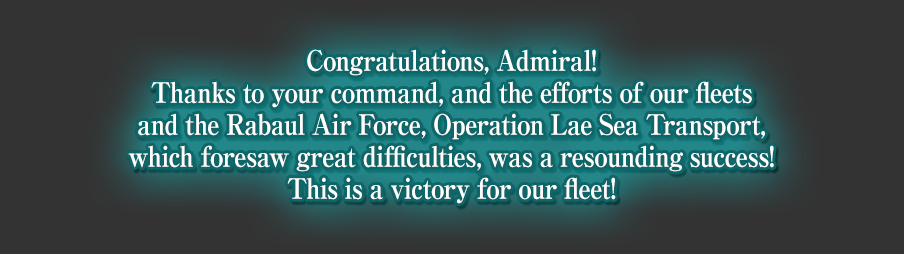
<style>
.page{position:relative;width:904px;height:254px;background:#333333}
.page>*{position:absolute;margin:0}
.t1{font:28px/32px "RyuminPro-ExBold";letter-spacing:-0.04em;color:#ffffff;scale:0.9 1}
</style>
<div class="page">
<p class="t1" style="left:128px;top:49px;width:646px;height:155px;text-align:center">Congratulations, Admiral!<br>Thanks to your command, and the efforts of our fleets<br>and the Rabaul Air Force, Operation Lae Sea Transport,<br>which foresaw great difficulties, was a resounding success!<br>This is a victory for our fleet!</p>
</div>
